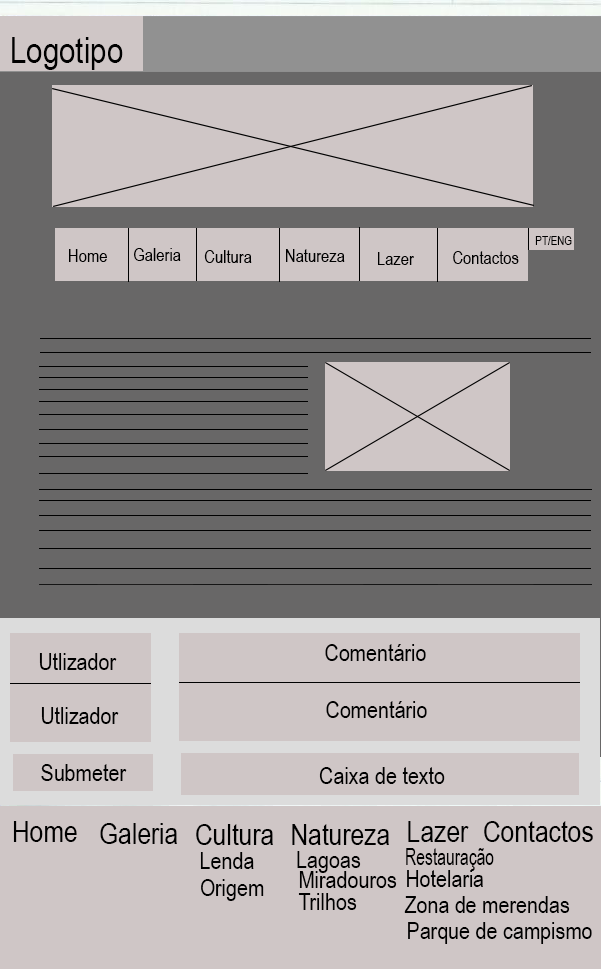
<style>
.page{position:relative;width:601px;height:969px;background:#cfc6c6}
.page>*{position:absolute;margin:0}
.t1{font:36px "ArialNarrow";color:#000000}
.t2{font:12px "ArialNarrow";color:#000000}
.t3{font:18px "ArialNarrow";color:#000000}
.t4{font:24px "ArialNarrow";color:#000000}
.t5{font:30px "ArialNarrow";color:#000000}
.t6{font:24px "ArialNarrow";color:#000000;scale:0.8 1}
</style>
<div class="page">
<p class="t1" style="left:12px;top:37px;width:111px;height:33px">Logotipo</p>
<p class="t2" style="left:535px;top:236px;width:37px;height:9px">PT/ENG</p>
<p class="t3" style="left:69px;top:249px;width:38px;height:13px">Home</p>
<p class="t3" style="left:134px;top:248px;width:47px;height:13px">Galeria</p>
<p class="t3" style="left:204px;top:250px;width:48px;height:13px">Cultura</p>
<p class="t3" style="left:286px;top:249px;width:59px;height:13px">Natureza</p>
<p class="t3" style="left:378px;top:252px;width:36px;height:13px">Lazer</p>
<p class="t3" style="left:453px;top:251px;width:66px;height:13px">Contactos</p>
<p class="t4" style="left:39px;top:653px;width:78px;height:17px">Utlizador</p>
<p class="t4" style="left:325px;top:644px;width:101px;height:17px">Comentário</p>
<p class="t4" style="left:326px;top:701px;width:101px;height:17px">Comentário</p>
<p class="t4" style="left:41px;top:707px;width:78px;height:17px">Utlizador</p>
<p class="t4" style="left:41px;top:764px;width:86px;height:17px">Submeter</p>
<p class="t4" style="left:319px;top:767px;width:126px;height:17px">Caixa de texto</p>
<p class="t5" style="left:13px;top:821px;width:64px;height:21px">Home</p>
<p class="t5" style="left:408px;top:821px;width:61px;height:21px">Lazer</p>
<p class="t5" style="left:484px;top:821px;width:109px;height:21px">Contactos</p>
<p class="t5" style="left:100px;top:823px;width:77px;height:21px">Galeria</p>
<p class="t5" style="left:196px;top:824px;width:77px;height:21px">Cultura</p>
<p class="t5" style="left:292px;top:824px;width:97px;height:21px">Natureza</p>
<p class="t4" style="left:200px;top:852px;width:54px;height:17px">Lenda</p>
<p class="t4" style="left:297px;top:851px;width:64px;height:22px">Lagoas</p>
<p class="t6" style="left:406px;top:848px;width:88px;height:23px">Restauração</p>
<p class="t4" style="left:407px;top:870px;width:76px;height:17px">Hotelaria</p>
<p class="t4" style="left:201px;top:879px;width:63px;height:22px">Origem</p>
<p class="t4" style="left:299px;top:871px;width:98px;height:17px">Miradouros</p>
<p class="t4" style="left:298px;top:893px;width:59px;height:17px">Trilhos</p>
<p class="t4" style="left:404px;top:896px;width:166px;height:17px">Zona de merendas</p>
<p class="t4" style="left:408px;top:922px;width:184px;height:22px">Parque de campismo</p>
</div>
